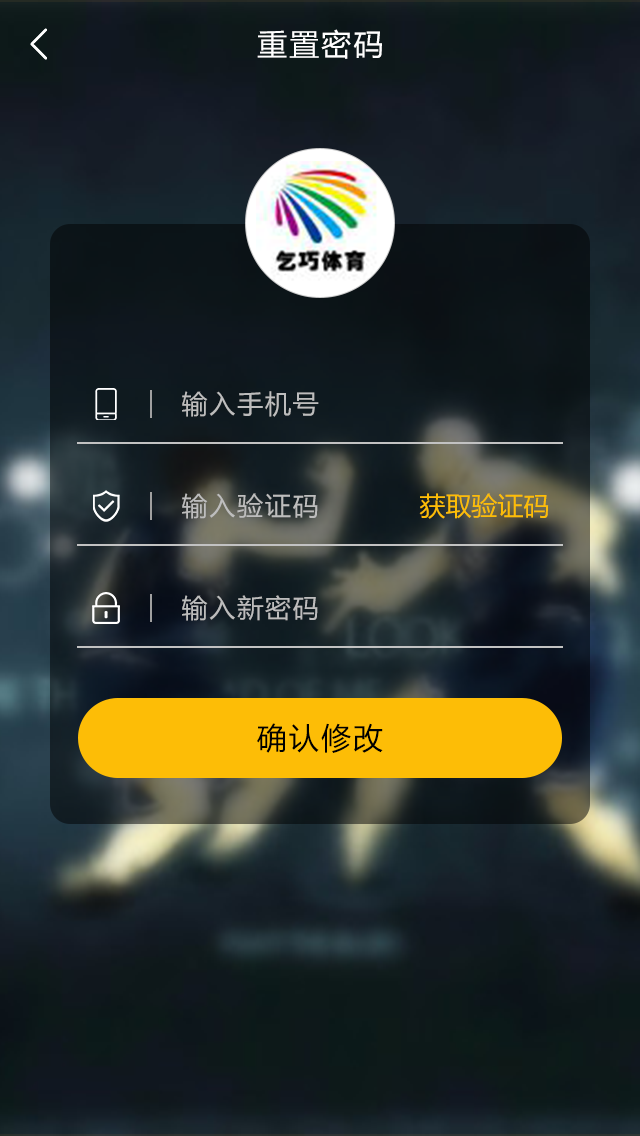
<style>
.page{position:relative;width:640px;height:1136px}
.page>*{position:absolute;margin:0}
.t1{font:30px "MicrosoftYaHei";letter-spacing:0.07em;color:#ffffff}
.t2{font:26px "MicrosoftYaHei";letter-spacing:0.07em;color:#bdbdbd}
.t3{font:26px "MicrosoftYaHei";color:#fdbd06}
.t4{font:30px "MicrosoftYaHei";letter-spacing:0.07em;color:#000000}
</style>
<div class="page">
<p class="t1" style="left:257px;top:29px;width:125px;height:30px">重置密码</p>
<p class="t2" style="left:182px;top:391px;width:137px;height:26px">输入手机号</p>
<p class="t2" style="left:182px;top:493px;width:136px;height:26px">输入验证码</p>
<p class="t3" style="left:419px;top:493px;width:130px;height:26px">获取验证码</p>
<p class="t2" style="left:182px;top:595px;width:136px;height:26px">输入新密码</p>
<p class="t4" style="left:257px;top:723px;width:126px;height:30px">确认修改</p>
</div>
